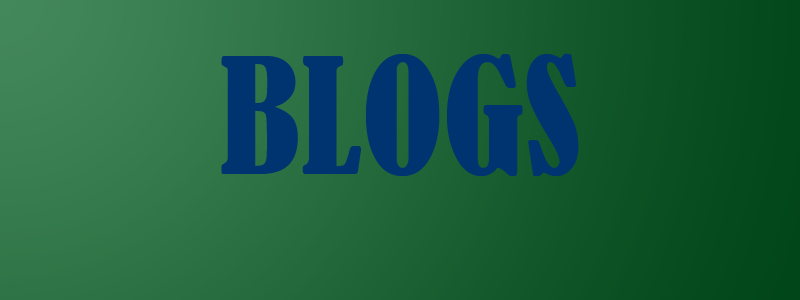
<style>
.page{position:relative;width:800px;height:300px}
.page>*{position:absolute;margin:0}
.t1{font:150px "BernardMT-Condensed";color:#003471}
</style>
<div class="page">
<p class="t1" style="left:221px;top:53px;width:358px;height:123px">BLOGS</p>
</div>
